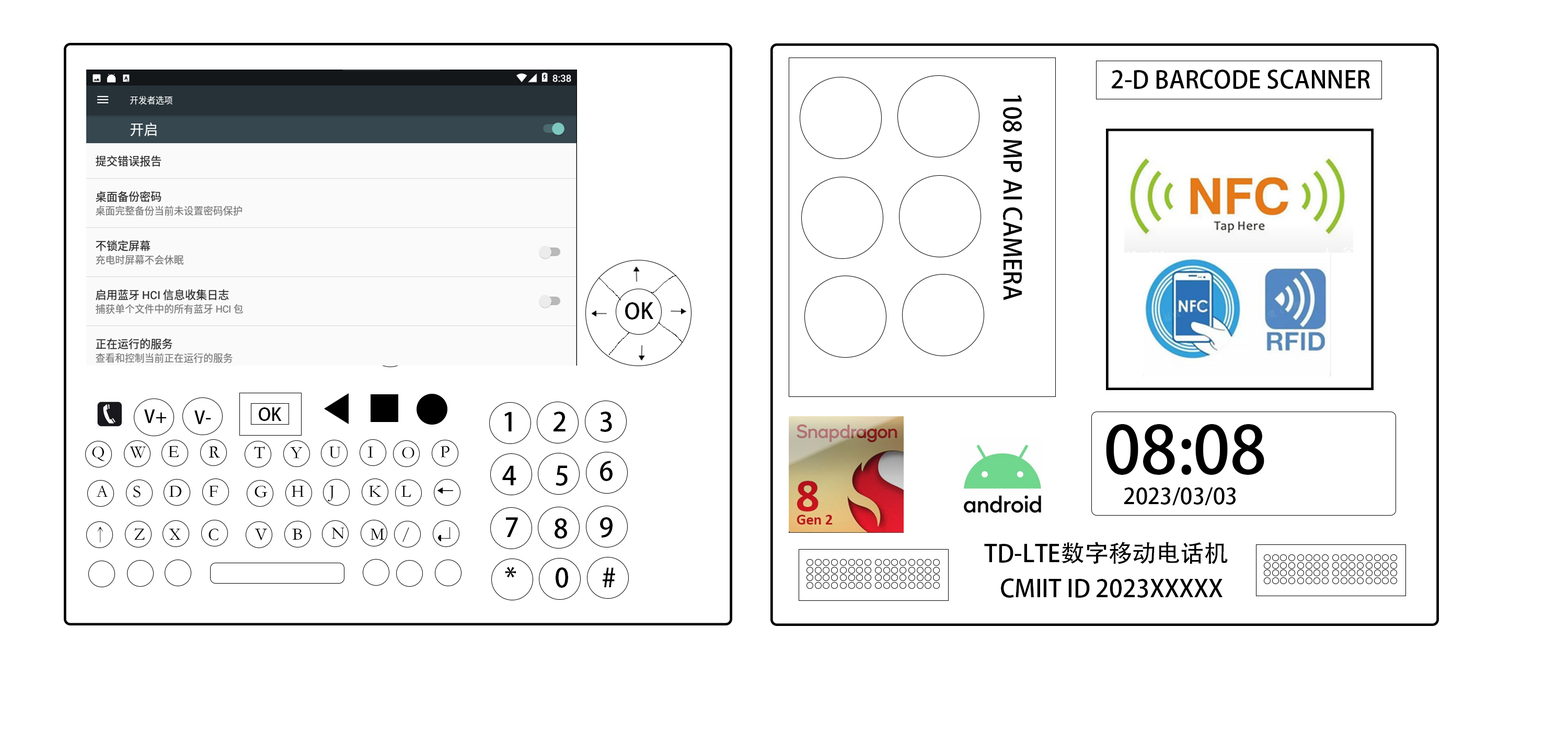
<style>
.page{position:relative;width:1568px;height:741px;background:#ffffff}
.page>*{position:absolute;margin:0}
.t1{font:24px "AdobeHeitiStd-Regular";color:#000000}
.t2{font:21.8px "AdobeHeitiStd-Regular";color:#000000}
.t3{font:17.4px "AdobeHeitiStd-Regular";color:#000000}
.t4{font:26.1px "AdobeHeitiStd-Regular";color:#000000}
.t5{font:65.3px "AdobeHeitiStd-Regular";color:#000000}
.t6{font:17.4px "STKaiti";color:#000000}
</style>
<div class="page">
<p class="t1" style="left:1112px;top:70px;width:258px;height:19px">2-D BARCODE SCANNER</p>
<p class="t1" style="left:1003px;top:95px;width:19px;height:205px">108 MP AI CAMERA</p>
<p class="t2" style="left:625px;top:302px;width:28px;height:17px">OK</p>
<p class="t3" style="left:144px;top:409px;width:22px;height:14px">V+</p>
<p class="t3" style="left:194px;top:410px;width:17px;height:14px">V-</p>
<p class="t3" style="left:259px;top:407px;width:23px;height:14px">OK</p>
<p class="t4" style="left:504px;top:411px;width:8px;height:20px">1</p>
<p class="t4" style="left:554px;top:411px;width:12px;height:20px">2</p>
<p class="t4" style="left:600px;top:411px;width:12px;height:21px">3</p>
<p class="t5" style="left:1106px;top:423px;width:158px;height:52px">08:08</p>
<p class="t6" style="left:92px;top:446px;width:13px;height:15px">Q</p>
<p class="t6" style="left:130px;top:446px;width:16px;height:12px">W</p>
<p class="t6" style="left:168px;top:446px;width:11px;height:11px">E</p>
<p class="t6" style="left:209px;top:446px;width:11px;height:11px">R</p>
<p class="t6" style="left:254px;top:446px;width:11px;height:12px">T</p>
<p class="t6" style="left:290px;top:447px;width:13px;height:11px">Y</p>
<p class="t6" style="left:329px;top:446px;width:12px;height:12px">U</p>
<p class="t6" style="left:367px;top:446px;width:6px;height:11px">I</p>
<p class="t6" style="left:402px;top:446px;width:12px;height:12px">O</p>
<p class="t6" style="left:440px;top:446px;width:9px;height:11px">P</p>
<p class="t4" style="left:600px;top:460px;width:13px;height:21px">6</p>
<p class="t4" style="left:502px;top:465px;width:14px;height:20px">4</p>
<p class="t4" style="left:556px;top:465px;width:12px;height:21px">5</p>
<p class="t6" style="left:96px;top:485px;width:12px;height:12px">A</p>
<p class="t6" style="left:133px;top:486px;width:8px;height:11px">S</p>
<p class="t6" style="left:169px;top:486px;width:13px;height:11px">D</p>
<p class="t6" style="left:209px;top:486px;width:9px;height:11px">F</p>
<p class="t6" style="left:255px;top:486px;width:13px;height:11px">G</p>
<p class="t6" style="left:291px;top:486px;width:13px;height:11px">H</p>
<p class="t6" style="left:328px;top:486px;width:7px;height:15px">J</p>
<p class="t6" style="left:369px;top:486px;width:13px;height:11px">K</p>
<p class="t6" style="left:401px;top:486px;width:10px;height:11px">L</p>
<p class="t3" style="left:437px;top:487px;width:16px;height:7px">←</p>
<p class="t2" style="left:1124px;top:487px;width:112px;height:18px">2023/03/03</p>
<p class="t4" style="left:506px;top:517px;width:12px;height:20px">7</p>
<p class="t4" style="left:555px;top:518px;width:12px;height:20px">8</p>
<p class="t4" style="left:600px;top:517px;width:13px;height:20px">9</p>
<p class="t6" style="left:97px;top:526px;width:6px;height:16px">↑</p>
<p class="t6" style="left:134px;top:527px;width:11px;height:12px">Z</p>
<p class="t6" style="left:169px;top:528px;width:12px;height:11px">X</p>
<p class="t6" style="left:209px;top:528px;width:9px;height:12px">C</p>
<p class="t6" style="left:255px;top:528px;width:12px;height:12px">V</p>
<p class="t6" style="left:292px;top:528px;width:10px;height:11px">B</p>
<p class="t6" style="left:331px;top:527px;width:13px;height:11px">N</p>
<p class="t6" style="left:370px;top:528px;width:15px;height:11px">M</p>
<p class="t6" style="left:402px;top:527px;width:7px;height:15px">/</p>
<p class="t1" style="left:984px;top:541px;width:244px;height:23px">TD-LTE数字移动电话机</p>
<p class="t4" style="left:505px;top:567px;width:11px;height:11px">*</p>
<p class="t4" style="left:556px;top:567px;width:12px;height:20px">0</p>
<p class="t4" style="left:603px;top:567px;width:12px;height:20px">#</p>
<p class="t1" style="left:1001px;top:578px;width:222px;height:19px">CMIIT ID 2023XXXXX</p>
</div>
